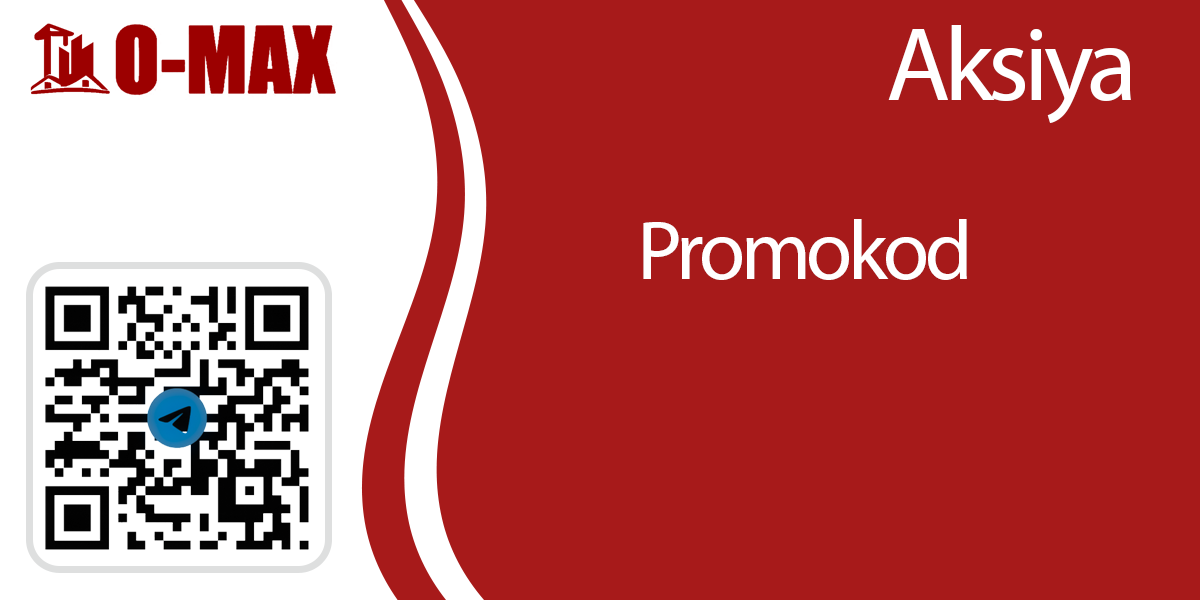
<style>
.page{position:relative;width:1200px;height:600px;background:#a71a1a}
.page>*{position:absolute;margin:0}
.t1{font:105px "MyriadPro-Regular";letter-spacing:-0.05em;color:#ffffff}
.t2{font:84px "MyriadPro-Regular";letter-spacing:-0.05em;color:#ffffff}
</style>
<div class="page">
<p class="t1" style="left:888px;top:25px;width:243px;height:99px">Aksiya</p>
<p class="t2" style="left:643px;top:219px;width:324px;height:61px">Promokod</p>
</div>
